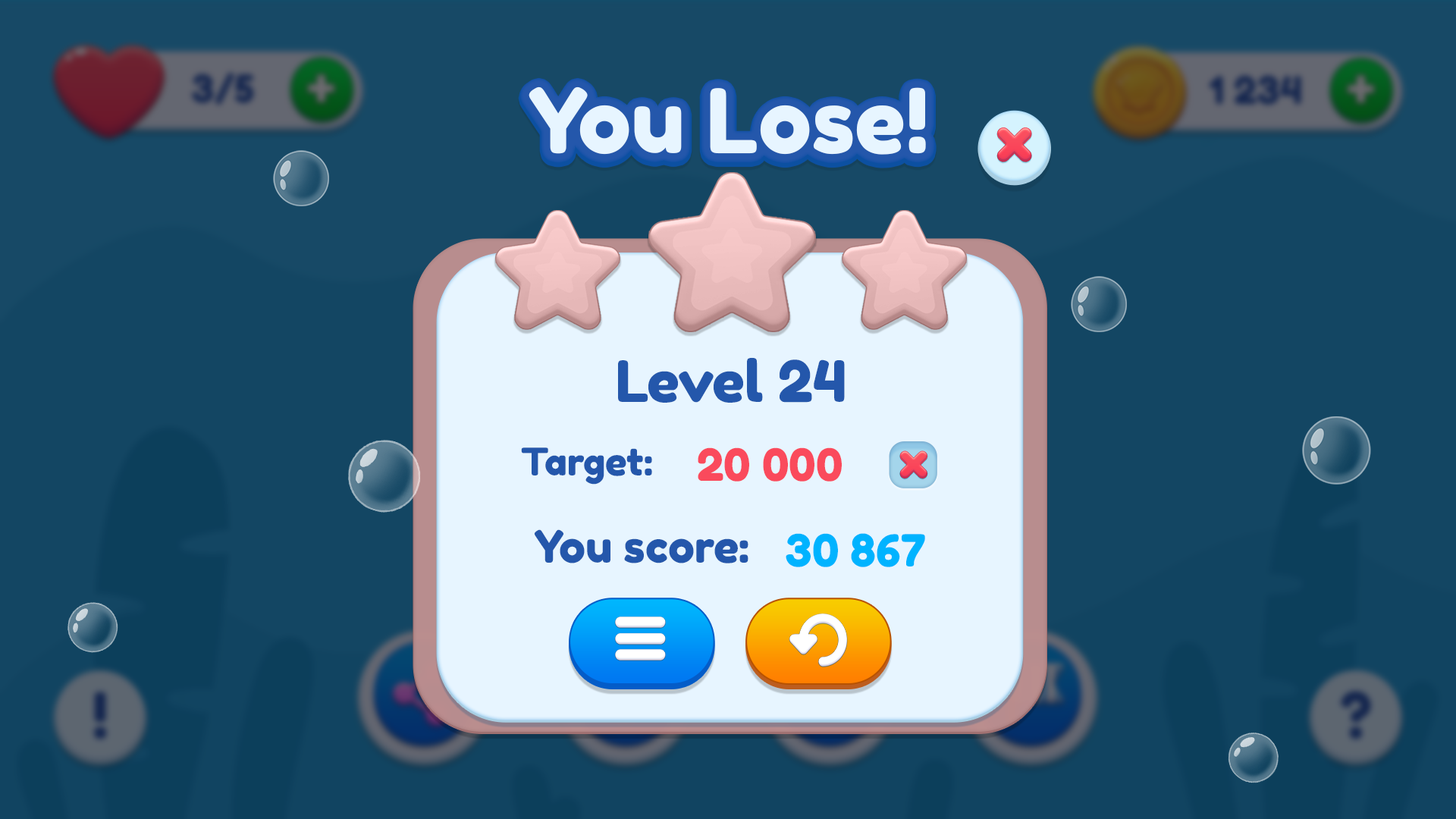
<style>
.page{position:relative;width:1456px;height:819px;background:#134663}
.page>*{position:absolute;margin:0}
.t1{font:88.5px "FredokaOne-Regular";color:#ffffff}
.t2{font:56.9px "FredokaOne-Regular";color:#2457ab}
.t3{font:37.9px "FredokaOne-Regular";color:#2457ab}
.t4{font:44.2px "FredokaOne-Regular";color:#fa4a5c}
.t5{font:44.2px "FredokaOne-Regular";color:#2457ab}
.t6{font:44.2px "FredokaOne-Regular";color:#00b3ff}
</style>
<div class="page">
<p class="t1" style="left:529px;top:86px;width:397px;height:69px">You Lose!</p>
<p class="t2" style="left:618px;top:357px;width:227px;height:46px">Level 24</p>
<p class="t3" style="left:521px;top:447px;width:131px;height:38px">Target:</p>
<p class="t4" style="left:698px;top:447px;width:144px;height:35px">20 000</p>
<p class="t5" style="left:534px;top:529px;width:214px;height:34px">You score:</p>
<p class="t6" style="left:786px;top:533px;width:139px;height:34px">30 867</p>
</div>
